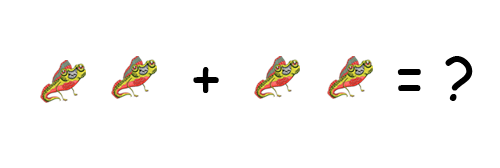
<style>
.page{position:relative;width:500px;height:168px;background:#ffffff}
.page>*{position:absolute;margin:0}
.t1{font:60px "ComicSansMS";color:#000000}
</style>
<div class="page">
<p class="t1" style="left:397px;top:56px;width:76px;height:45px">= ?</p>
<p class="t1" style="left:193px;top:67px;width:26px;height:26px">+</p>
</div>
